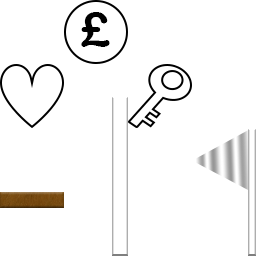
<style>
.page{position:relative;width:256px;height:256px;background:#ffffff}
.page>*{position:absolute;margin:0}
.t1{font:48px "ArialRoundedMTBold";color:#000000}
</style>
<div class="page">
<p class="t1" style="left:81px;top:12px;width:29px;height:35px">£</p>
</div>
